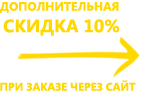
<style>
.page{position:relative;width:144px;height:95px;background:#ffffff}
.page>*{position:absolute;margin:0}
.t1{font:12px "SegoeUI-Bold";color:#fed800;text-transform:uppercase}
.t2{font:18px "SegoeUI-Bold";color:#fed800;text-transform:uppercase}
.t3{font:11px "SegoeUI-Bold";color:#fed800;text-transform:uppercase}
</style>
<div class="page">
<p class="t1" style="left:0px;top:2px;width:120px;height:34px;text-align:center">дополнительная <br><span class="t2">скидка 10%</span></p>
<p class="t3" style="left:0px;top:80px;width:136px;height:11px">при заказе через сайт</p>
</div>
